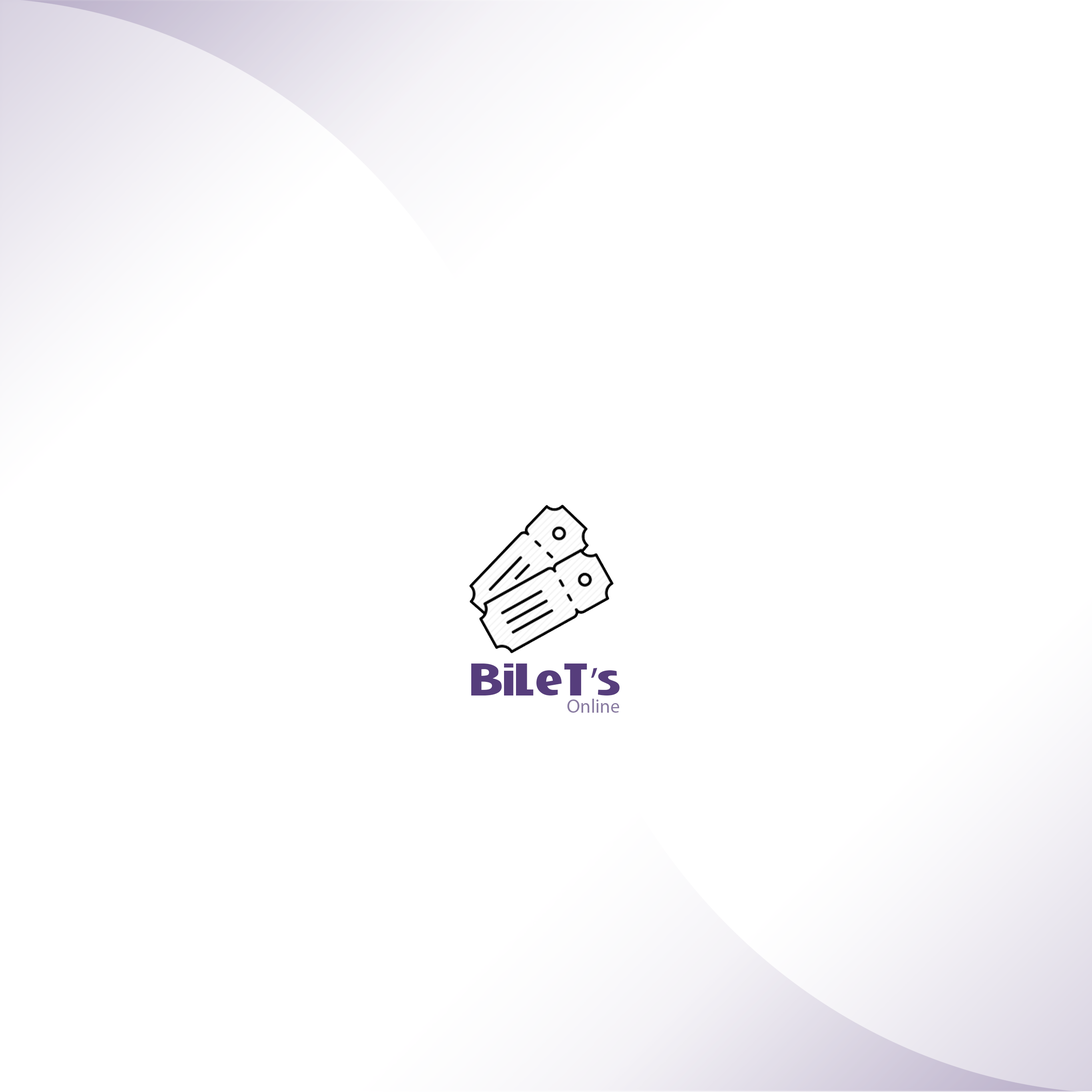
<style>
.page{position:relative;width:1092px;height:1092px;background:#ffffff}
.page>*{position:absolute;margin:0}
.t1{font:40.8px "NiobiumBlack";color:#563d7c}
.t2{font:40.8px "MyriadPro-Regular";color:#563d7c}
.t3{font:19.2px "MyriadPro-Regular";color:#8a7ca2}
</style>
<div class="page">
<p class="t1" style="left:471px;top:664px;width:149px;height:31px">BiLeT<span class="t2">’</span>s</p>
<p class="t3" style="left:567px;top:699px;width:52px;height:14px">Online</p>
</div>
